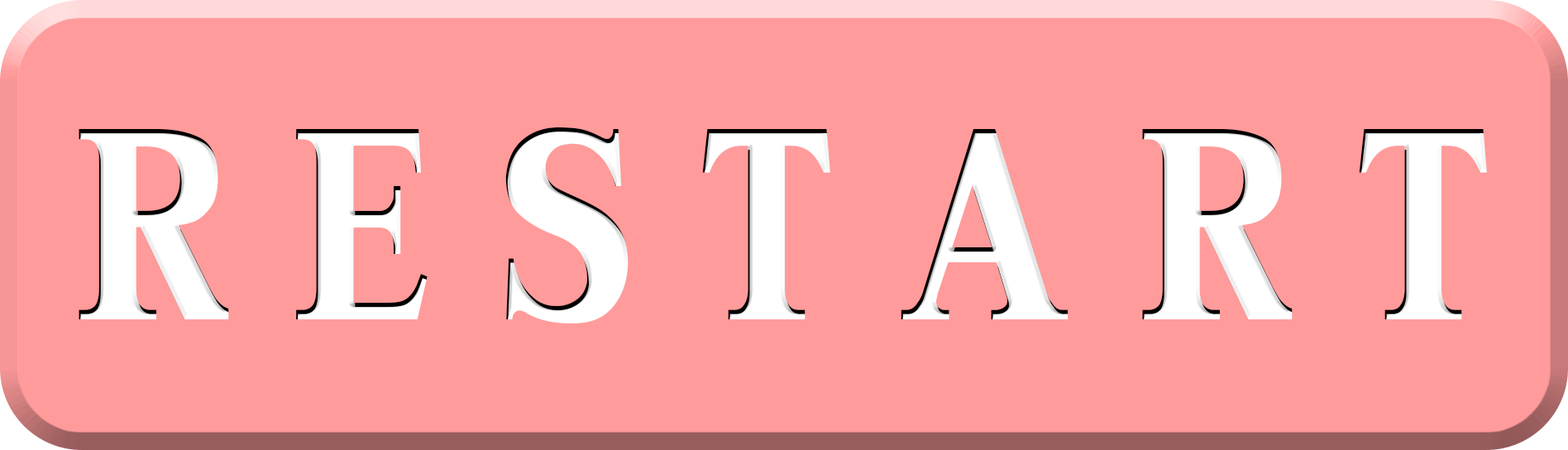
<style>
.page{position:relative;width:1568px;height:450px;background:#ff9b9b}
.page>*{position:absolute;margin:0}
.t1{font:394.8px "KodchiangUPCBold";letter-spacing:0.16em;color:#ffffff}
</style>
<div class="page">
<p class="t1" style="left:79px;top:127px;width:1408px;height:196px">RESTART</p>
</div>
